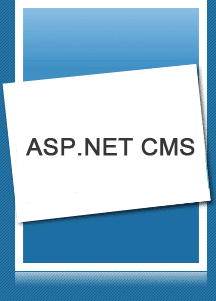
<style>
.page{position:relative;width:216px;height:301px;background:#ffffff}
.page>*{position:absolute;margin:0}
.t1{font:24px "ArialMT";color:#383636;font-weight:bold}
</style>
<div class="page">
<p class="t1" style="left:26px;top:138px;width:169px;height:18px">ASP.NET CMS</p>
</div>
